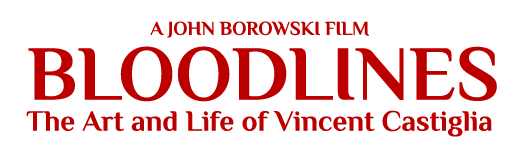
<style>
.page{position:relative;width:525px;height:157px;background:#ffffff}
.page>*{position:absolute;margin:0}
.t1{font:19.4px "Philosopher-Bold";color:#bc0000}
.t2{font:77.8px "Philosopher-Bold";color:#bc0000}
.t3{font:29.2px "Philosopher-Bold";color:#bc0000}
</style>
<div class="page">
<p class="t1" style="left:150px;top:21px;width:219px;height:17px">A JOHN BOROWSKI FILM</p>
<p class="t2" style="left:28px;top:46px;width:469px;height:56px">BLOODLINES</p>
<p class="t3" style="left:26px;top:110px;width:466px;height:27px">The Art and Life of Vincent Castiglia</p>
</div>
